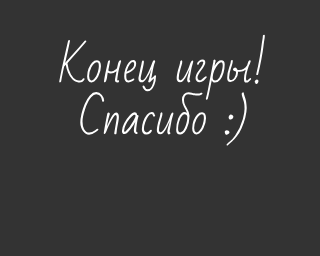
<style>
.page{position:relative;width:320px;height:256px;background:#333333}
.page>*{position:absolute;margin:0}
.t1{font:43px "BadScript-Regular";color:#ffffff}
</style>
<div class="page">
<p class="t1" style="left:59px;top:34px;width:206px;height:112px;text-align:center">Конец игры!<br>Спасибо :)</p>
</div>
